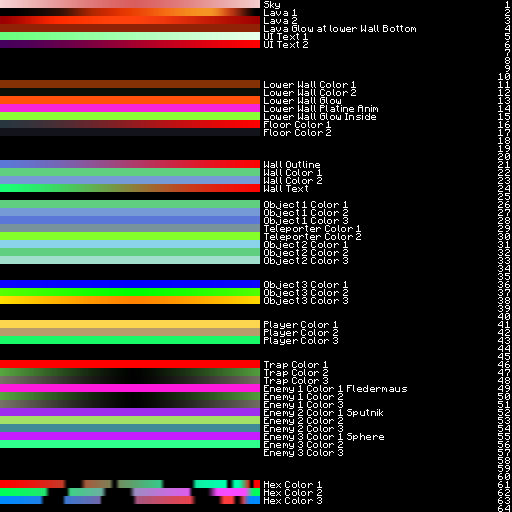
<style>
.page{position:relative;width:512px;height:512px;background:#000000}
.page>*{position:absolute;margin:0}
.t1{font:8px "Minecraftia-Regular";letter-spacing:0.05em;color:#ffffff}
</style>
<div class="page">
<p class="t1" style="left:264px;top:1px;width:16px;height:8px">Sky</p>
<p class="t1" style="left:505px;top:1px;width:5px;height:7px">1</p>
<p class="t1" style="left:264px;top:17px;width:33px;height:7px">Lava 2</p>
<p class="t1" style="left:264px;top:9px;width:33px;height:7px">Lava 1</p>
<p class="t1" style="left:505px;top:17px;width:5px;height:7px">3</p>
<p class="t1" style="left:505px;top:9px;width:5px;height:7px">2</p>
<p class="t1" style="left:264px;top:25px;width:152px;height:7px">Lava Glow at lower Wall Bottom</p>
<p class="t1" style="left:505px;top:25px;width:5px;height:7px">4</p>
<p class="t1" style="left:264px;top:41px;width:44px;height:7px">UI Text 2</p>
<p class="t1" style="left:264px;top:33px;width:44px;height:7px">UI Text 1</p>
<p class="t1" style="left:505px;top:41px;width:5px;height:7px">6</p>
<p class="t1" style="left:505px;top:33px;width:5px;height:7px">5</p>
<p class="t1" style="left:505px;top:49px;width:5px;height:7px">7</p>
<p class="t1" style="left:505px;top:65px;width:5px;height:7px">9</p>
<p class="t1" style="left:505px;top:57px;width:5px;height:7px">8</p>
<p class="t1" style="left:498px;top:73px;width:12px;height:7px">10</p>
<p class="t1" style="left:264px;top:89px;width:92px;height:7px">Lower Wall Color 2</p>
<p class="t1" style="left:264px;top:81px;width:92px;height:7px">Lower Wall Color 1</p>
<p class="t1" style="left:498px;top:89px;width:12px;height:7px">12</p>
<p class="t1" style="left:498px;top:81px;width:12px;height:7px">11</p>
<p class="t1" style="left:264px;top:97px;width:77px;height:7px">Lower Wall Glow</p>
<p class="t1" style="left:498px;top:97px;width:12px;height:7px">13</p>
<p class="t1" style="left:264px;top:113px;width:112px;height:7px">Lower Wall Glow Inside</p>
<p class="t1" style="left:264px;top:105px;width:114px;height:7px">Lower Wall Platine Anim</p>
<p class="t1" style="left:498px;top:113px;width:12px;height:7px">15</p>
<p class="t1" style="left:498px;top:105px;width:12px;height:7px">14</p>
<p class="t1" style="left:264px;top:121px;width:67px;height:7px">Floor Color 1</p>
<p class="t1" style="left:498px;top:121px;width:12px;height:7px">16</p>
<p class="t1" style="left:264px;top:129px;width:67px;height:7px">Floor Color 2</p>
<p class="t1" style="left:498px;top:137px;width:12px;height:7px">18</p>
<p class="t1" style="left:498px;top:129px;width:12px;height:7px">17</p>
<p class="t1" style="left:498px;top:145px;width:12px;height:7px">19</p>
<p class="t1" style="left:264px;top:161px;width:56px;height:7px">Wall Outline</p>
<p class="t1" style="left:498px;top:161px;width:12px;height:7px">21</p>
<p class="t1" style="left:498px;top:153px;width:12px;height:7px">20</p>
<p class="t1" style="left:264px;top:169px;width:58px;height:7px">Wall Color 1</p>
<p class="t1" style="left:498px;top:169px;width:12px;height:7px">22</p>
<p class="t1" style="left:264px;top:185px;width:44px;height:7px">Wall Text</p>
<p class="t1" style="left:264px;top:177px;width:58px;height:7px">Wall Color 2</p>
<p class="t1" style="left:498px;top:185px;width:12px;height:7px">24</p>
<p class="t1" style="left:498px;top:177px;width:12px;height:7px">23</p>
<p class="t1" style="left:498px;top:193px;width:12px;height:7px">25</p>
<p class="t1" style="left:264px;top:209px;width:84px;height:8px">Object 1 Color 2</p>
<p class="t1" style="left:264px;top:201px;width:84px;height:8px">Object 1 Color 1</p>
<p class="t1" style="left:498px;top:209px;width:12px;height:7px">27</p>
<p class="t1" style="left:498px;top:201px;width:12px;height:7px">26</p>
<p class="t1" style="left:264px;top:217px;width:84px;height:8px">Object 1 Color 3</p>
<p class="t1" style="left:498px;top:217px;width:12px;height:7px">28</p>
<p class="t1" style="left:264px;top:233px;width:97px;height:8px">Teleporter Color 2</p>
<p class="t1" style="left:264px;top:225px;width:97px;height:8px">Teleporter Color 1</p>
<p class="t1" style="left:498px;top:233px;width:12px;height:7px">30</p>
<p class="t1" style="left:498px;top:225px;width:12px;height:7px">29</p>
<p class="t1" style="left:264px;top:241px;width:84px;height:8px">Object 2 Color 1</p>
<p class="t1" style="left:498px;top:241px;width:12px;height:7px">31</p>
<p class="t1" style="left:264px;top:257px;width:84px;height:8px">Object 2 Color 3</p>
<p class="t1" style="left:264px;top:249px;width:84px;height:8px">Object 2 Color 2</p>
<p class="t1" style="left:498px;top:257px;width:12px;height:7px">33</p>
<p class="t1" style="left:498px;top:249px;width:12px;height:7px">32</p>
<p class="t1" style="left:498px;top:265px;width:12px;height:7px">34</p>
<p class="t1" style="left:264px;top:281px;width:84px;height:8px">Object 3 Color 1</p>
<p class="t1" style="left:498px;top:281px;width:12px;height:7px">36</p>
<p class="t1" style="left:498px;top:273px;width:12px;height:7px">35</p>
<p class="t1" style="left:264px;top:289px;width:84px;height:8px">Object 3 Color 2</p>
<p class="t1" style="left:498px;top:289px;width:12px;height:7px">37</p>
<p class="t1" style="left:264px;top:297px;width:84px;height:8px">Object 3 Color 3</p>
<p class="t1" style="left:498px;top:305px;width:12px;height:7px">39</p>
<p class="t1" style="left:498px;top:297px;width:12px;height:7px">38</p>
<p class="t1" style="left:498px;top:313px;width:12px;height:7px">40</p>
<p class="t1" style="left:264px;top:329px;width:74px;height:8px">Player Color 2</p>
<p class="t1" style="left:264px;top:321px;width:74px;height:8px">Player Color 1</p>
<p class="t1" style="left:264px;top:329px;width:74px;height:8px">Player Color 2</p>
<p class="t1" style="left:264px;top:321px;width:74px;height:8px">Player Color 1</p>
<p class="t1" style="left:498px;top:329px;width:12px;height:7px">42</p>
<p class="t1" style="left:498px;top:321px;width:12px;height:7px">41</p>
<p class="t1" style="left:264px;top:337px;width:74px;height:8px">Player Color 3</p>
<p class="t1" style="left:264px;top:337px;width:74px;height:8px">Player Color 3</p>
<p class="t1" style="left:498px;top:337px;width:12px;height:7px">43</p>
<p class="t1" style="left:498px;top:353px;width:12px;height:7px">45</p>
<p class="t1" style="left:498px;top:345px;width:12px;height:7px">44</p>
<p class="t1" style="left:264px;top:361px;width:64px;height:8px">Trap Color 1</p>
<p class="t1" style="left:498px;top:361px;width:12px;height:7px">46</p>
<p class="t1" style="left:264px;top:377px;width:64px;height:8px">Trap Color 3</p>
<p class="t1" style="left:264px;top:369px;width:64px;height:8px">Trap Color 2</p>
<p class="t1" style="left:498px;top:377px;width:12px;height:7px">48</p>
<p class="t1" style="left:498px;top:369px;width:12px;height:7px">47</p>
<p class="t1" style="left:264px;top:385px;width:143px;height:8px">Enemy 1 Color 1 Fledermaus</p>
<p class="t1" style="left:498px;top:385px;width:12px;height:7px">49</p>
<p class="t1" style="left:264px;top:401px;width:79px;height:8px">Enemy 1 Color 3</p>
<p class="t1" style="left:264px;top:393px;width:79px;height:8px">Enemy 1 Color 2</p>
<p class="t1" style="left:498px;top:401px;width:12px;height:7px">51</p>
<p class="t1" style="left:498px;top:393px;width:12px;height:7px">50</p>
<p class="t1" style="left:264px;top:409px;width:119px;height:8px">Enemy 2 Color 1 Sputnik</p>
<p class="t1" style="left:498px;top:409px;width:12px;height:7px">52</p>
<p class="t1" style="left:264px;top:425px;width:79px;height:8px">Enemy 2 Color 3</p>
<p class="t1" style="left:264px;top:417px;width:79px;height:8px">Enemy 2 Color 2</p>
<p class="t1" style="left:498px;top:425px;width:12px;height:7px">54</p>
<p class="t1" style="left:498px;top:417px;width:12px;height:7px">53</p>
<p class="t1" style="left:264px;top:433px;width:120px;height:8px">Enemy 3 Color 1 Sphere</p>
<p class="t1" style="left:498px;top:433px;width:12px;height:7px">55</p>
<p class="t1" style="left:264px;top:449px;width:79px;height:8px">Enemy 3 Color 3</p>
<p class="t1" style="left:264px;top:441px;width:79px;height:8px">Enemy 3 Color 2</p>
<p class="t1" style="left:498px;top:449px;width:12px;height:7px">57</p>
<p class="t1" style="left:498px;top:441px;width:12px;height:7px">56</p>
<p class="t1" style="left:498px;top:457px;width:12px;height:7px">58</p>
<p class="t1" style="left:498px;top:473px;width:12px;height:7px">60</p>
<p class="t1" style="left:498px;top:465px;width:12px;height:7px">59</p>
<p class="t1" style="left:264px;top:481px;width:58px;height:7px">Hex Color 1</p>
<p class="t1" style="left:498px;top:481px;width:12px;height:7px">61</p>
<p class="t1" style="left:264px;top:497px;width:58px;height:7px">Hex Color 3</p>
<p class="t1" style="left:264px;top:489px;width:58px;height:7px">Hex Color 2</p>
<p class="t1" style="left:498px;top:497px;width:12px;height:7px">63</p>
<p class="t1" style="left:498px;top:489px;width:12px;height:7px">62</p>
<p class="t1" style="left:498px;top:505px;width:12px;height:7px">64</p>
</div>
